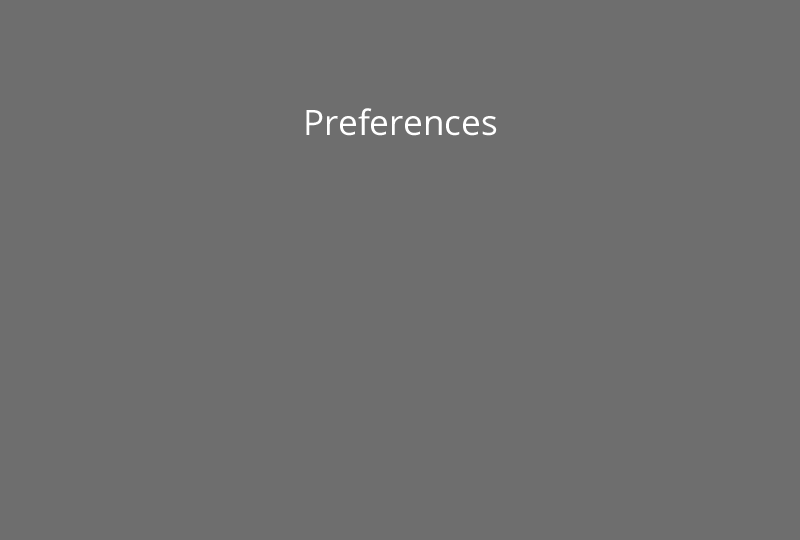
<style>
.page{position:relative;width:800px;height:540px;background:#6e6e6e}
.page>*{position:absolute;margin:0}
.t1{font:35px "OpenSans";color:#ffffff}
</style>
<div class="page">
<p class="t1" style="left:306px;top:108px;width:191px;height:28px">Preferences</p>
</div>
